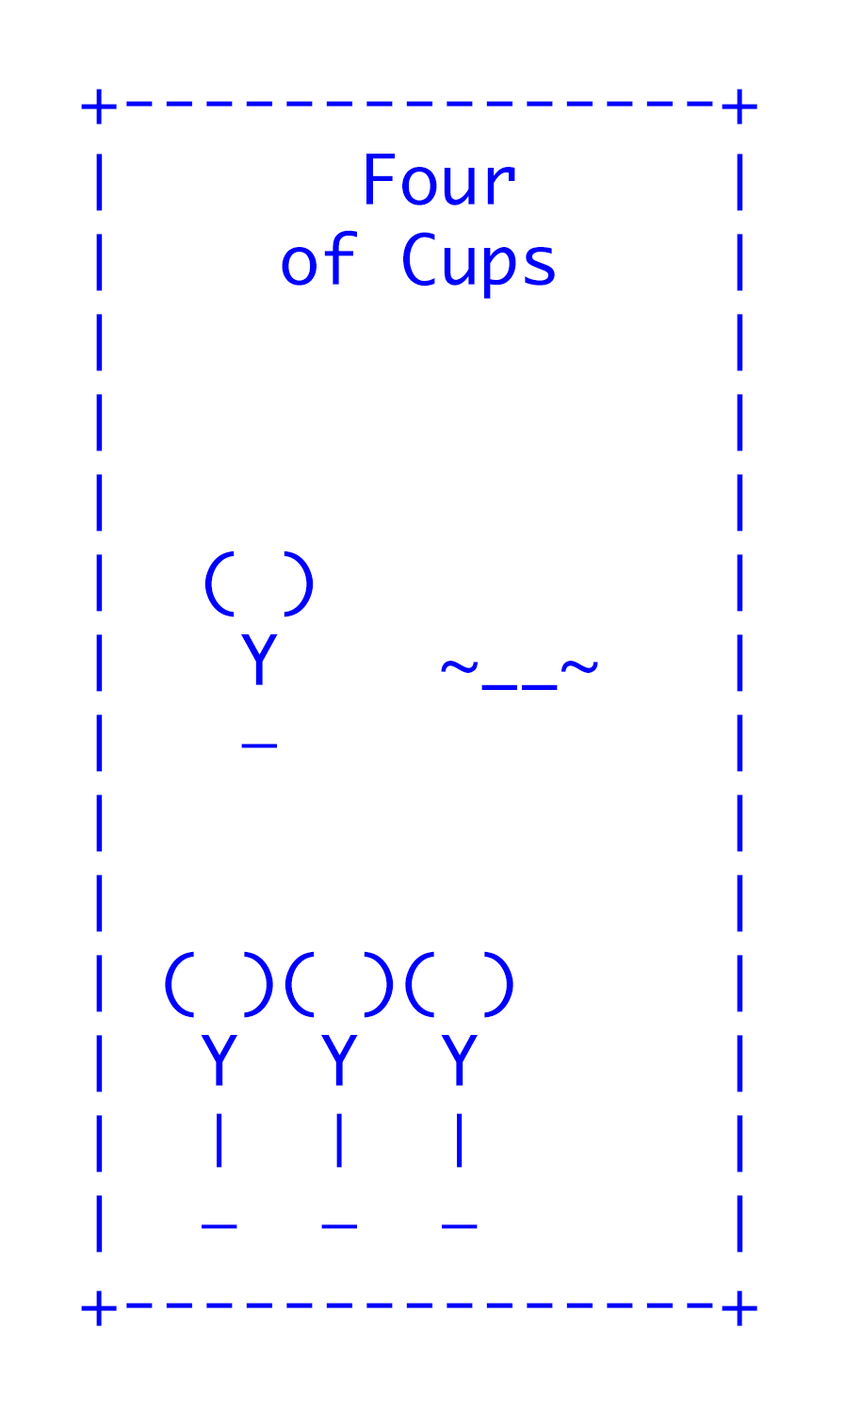
<style>
.page{position:relative;width:845px;height:1411px;background:#ffffff}
.page>*{position:absolute;margin:0}
.t1{font:66.7px "Monaco";color:#0000ff}
</style>
<div class="page">
<p class="t1" style="left:81px;top:89px;width:677px;height:1237px">+---------------+<br>│      Four     │<br>│    of Cups    │<br>│               │<br>│               │<br>│               │<br>│  ( )          │ <br>│   Y    ~__~   │ <br>│   —           │<br>│               │<br>│               │<br>│ ( )( )( )     │ <br>│  Y  Y  Y      │<br>│  |  |  |      │ <br>│  —  —  —      │<br>+---------------+</p>
</div>
